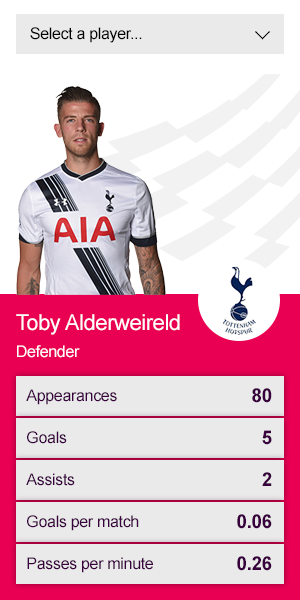
<style>
.page{position:relative;width:300px;height:600px;background:#eaeaea}
.page>*{position:absolute;margin:0}
.t1{font:16px "ArialMT";letter-spacing:-0.02em;color:#000000}
.t2{font:22px "ArialMT";letter-spacing:-0.02em;color:#ffffff}
.t3{font:16px "ArialMT";letter-spacing:-0.02em;color:#ffffff}
.t4{font:16px "ArialMT";letter-spacing:-0.02em;color:#38003c}
.t5{font:19px "Arial-BoldMT";letter-spacing:-0.02em;color:#38003c}
</style>
<div class="page">
<p class="t1" style="left:30px;top:27px;width:112px;height:16px">Select a player...</p>
<p class="t2" style="left:16px;top:314px;width:164px;height:21px">Toby Alderweireld</p>
<p class="t3" style="left:17px;top:345px;width:63px;height:13px">Defender</p>
<p class="t4" style="left:26px;top:389px;width:91px;height:16px">Appearances</p>
<p class="t5" style="left:252px;top:388px;width:20px;height:15px">80</p>
<p class="t4" style="left:27px;top:431px;width:40px;height:13px">Goals</p>
<p class="t5" style="left:262px;top:430px;width:10px;height:15px">5</p>
<p class="t4" style="left:26px;top:473px;width:49px;height:13px">Assists</p>
<p class="t5" style="left:262px;top:472px;width:10px;height:14px">2</p>
<p class="t4" style="left:27px;top:515px;width:112px;height:16px">Goals per match</p>
<p class="t5" style="left:237px;top:514px;width:35px;height:15px">0.06</p>
<p class="t4" style="left:27px;top:557px;width:126px;height:16px">Passes per minute</p>
<p class="t5" style="left:237px;top:556px;width:35px;height:15px">0.26</p>
</div>
